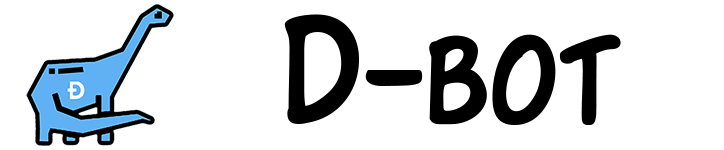
<style>
.page{position:relative;width:724px;height:150px;background:#ffffff}
.page>*{position:absolute;margin:0}
.t1{font:151px "NorBScribe";color:#000000}
</style>
<div class="page">
<p class="t1" style="left:284px;top:14px;width:337px;height:112px">D-bot</p>
</div>
